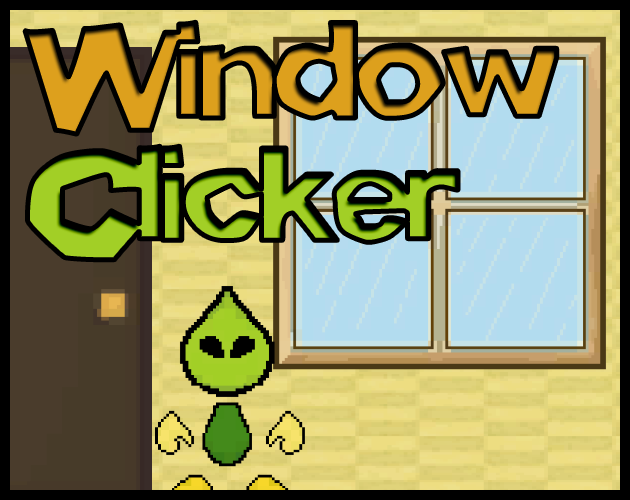
<style>
.page{position:relative;width:630px;height:500px}
.page>*{position:absolute;margin:0}
.t1{font:140px "Lickspittle";scale:1.2 1}
</style>
<div class="page">
<p class="t1" style="left:25px;top:22px;width:532px;height:112px">Window</p>
<p class="t1" style="left:27px;top:146px;width:431px;height:114px">Clicker</p>
</div>
